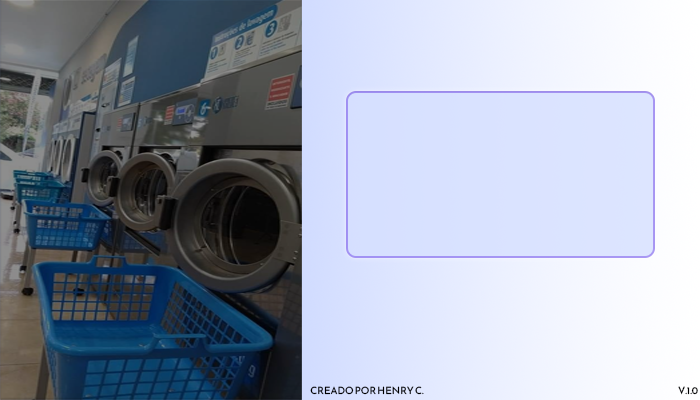
<style>
.page{position:relative;width:700px;height:400px}
.page>*{position:absolute;margin:0}
.t1{font:10px "ReemKufi-Regular";color:#000000;text-transform:uppercase}
</style>
<div class="page">
<p class="t1" style="left:310px;top:386px;width:114px;height:9px">creado por henry C.</p>
<p class="t1" style="left:678px;top:386px;width:20px;height:9px">v.1.0</p>
</div>
